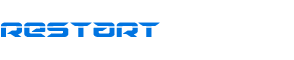
<style>
.page{position:relative;width:294px;height:60px;background:#ffffff}
.page>*{position:absolute;margin:0}
.t1{font:30px "DriveLaser";color:#0074e1;scale:0.76 1}
</style>
<div class="page">
<p class="t1" style="left:1px;top:22px;width:159px;height:15px">restart</p>
</div>
